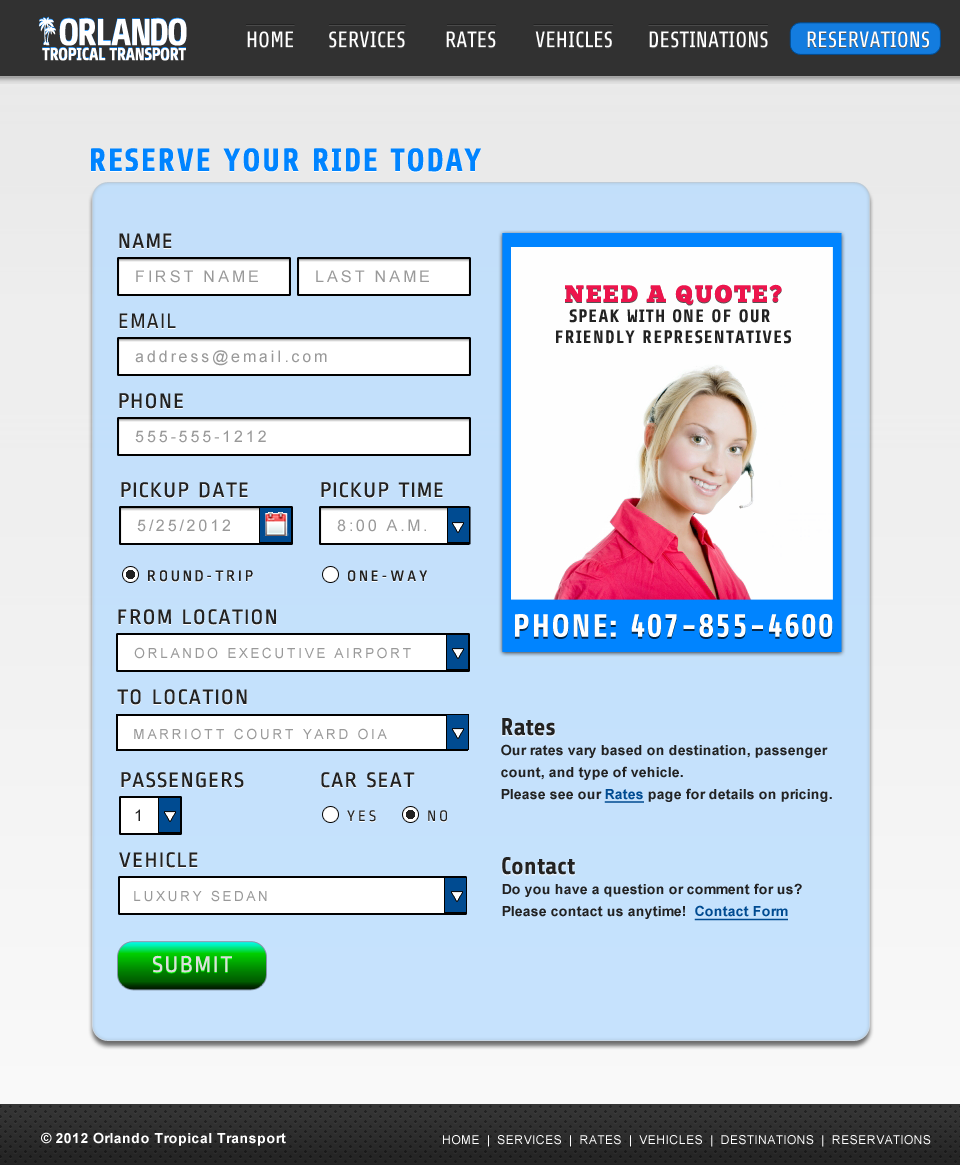
<style>
.page{position:relative;width:960px;height:1165px}
.page>*{position:absolute;margin:0}
.t1{font:22px "Share-Regular";color:#ffffff}
.t2{font:22px "Share-Regular"}
.t3{font:32px "Share-Bold";letter-spacing:0.06em;color:#0084ff;text-transform:uppercase}
.t4{font:22px "RopaSans-Regular";letter-spacing:0.06em;color:#222222;text-transform:uppercase}
.t5{font:16px "ArialMT";letter-spacing:0.18em;color:#999999;text-transform:uppercase}
.t6{font:24px "ChunkFive-Roman";letter-spacing:0.06em;color:#ed144c;text-transform:uppercase}
.t7{font:22px "RopaSans-Regular";letter-spacing:0.06em;text-transform:uppercase}
.t8{font:18px/21.6px "Share-Bold";letter-spacing:0.06em;color:#222222;text-transform:uppercase}
.t9{font:16px "ArialMT";letter-spacing:0.18em;color:#999999}
.t10{font:16px "RopaSans-Regular";letter-spacing:0.18em;text-transform:uppercase}
.t11{font:16px "RopaSans-Regular";letter-spacing:0.18em;color:#222222;text-transform:uppercase}
.t12{font:32px "Share-Bold";letter-spacing:0.06em;color:#fefefe;text-transform:uppercase}
.t13{font:14px "ArialMT";letter-spacing:0.18em;color:#999999;text-transform:uppercase}
.t14{font:24px "Share-Bold";color:#222222}
.t15{font:14px/21.6px "Arial-BoldMT";color:#222222}
.t16{font:24px/21.6px "Share-Bold";color:#222222}
.t17{font:14px/21.6px "Arial-BoldMT";color:#004b91;text-decoration:underline}
.t18{font:16px "ArialMT";letter-spacing:0.18em;color:#222222;text-transform:uppercase}
.t19{font:24px "RopaSans-Regular";letter-spacing:0.06em;color:#dddddd;text-transform:uppercase}
.t20{font:14px "Arial-BoldMT";letter-spacing:0.02em;color:#ffffff}
.t21{font:14px "Arial-BoldMT";letter-spacing:0.02em;color:#ffffff;text-transform:uppercase}
.t22{font:12px "ArialMT";letter-spacing:0.04em;color:#ffffff;text-transform:uppercase}
</style>
<div class="page">
<p class="t1" style="left:247px;top:32px;width:46px;height:17px">HOME</p>
<p class="t1" style="left:247px;top:31px;width:46px;height:17px">HOME</p>
<p class="t2" style="left:329px;top:32px;width:76px;height:17px">SERVICES</p>
<p class="t1" style="left:329px;top:31px;width:76px;height:17px">SERVICES</p>
<p class="t2" style="left:446px;top:32px;width:50px;height:17px">RATES</p>
<p class="t1" style="left:446px;top:31px;width:50px;height:17px">RATES</p>
<p class="t2" style="left:535px;top:32px;width:77px;height:17px">VEHICLES</p>
<p class="t1" style="left:535px;top:31px;width:77px;height:17px">VEHICLES</p>
<p class="t2" style="left:649px;top:32px;width:119px;height:17px">DESTINATIONS</p>
<p class="t1" style="left:649px;top:31px;width:119px;height:17px">DESTINATIONS</p>
<p class="t2" style="left:807px;top:32px;width:122px;height:17px">RESERVATIONS</p>
<p class="t1" style="left:807px;top:31px;width:122px;height:17px">RESERVATIONS</p>
<p class="t3" style="left:91px;top:149px;width:390px;height:24px">reserve your ride today</p>
<p class="t3" style="left:91px;top:148px;width:390px;height:24px">reserve your ride today</p>
<p class="t4" style="left:119px;top:233px;width:53px;height:15px">NAME</p>
<p class="t4" style="left:119px;top:234px;width:53px;height:15px">NAME</p>
<p class="t5" style="left:136px;top:270px;width:122px;height:13px">first name</p>
<p class="t5" style="left:316px;top:270px;width:113px;height:13px">last name</p>
<p class="t6" style="left:565px;top:285px;width:217px;height:21px">NEED A QUOTE?</p>
<p class="t6" style="left:565px;top:284px;width:217px;height:21px">NEED A QUOTE?</p>
<p class="t7" style="left:119px;top:314px;width:57px;height:15px">email</p>
<p class="t4" style="left:119px;top:313px;width:57px;height:15px">email</p>
<p class="t8" style="left:556px;top:309px;width:235px;height:35px;text-align:center">SPEAK WITH one of our <br>friendly REPRESENTATIVEs</p>
<p class="t9" style="left:135px;top:350px;width:192px;height:16px">address@email.com</p>
<p class="t4" style="left:119px;top:394px;width:64px;height:16px">phone</p>
<p class="t4" style="left:119px;top:393px;width:64px;height:16px">phone</p>
<p class="t9" style="left:135px;top:430px;width:131px;height:13px">555-555-1212</p>
<p class="t7" style="left:121px;top:483px;width:127px;height:16px">PICKUP DATE</p>
<p class="t4" style="left:121px;top:482px;width:127px;height:16px">PICKUP DATE</p>
<p class="t4" style="left:321px;top:483px;width:122px;height:16px">PICKUP time</p>
<p class="t4" style="left:321px;top:482px;width:122px;height:16px">PICKUP time</p>
<p class="t5" style="left:137px;top:519px;width:93px;height:13px">5/25/2012</p>
<p class="t5" style="left:337px;top:519px;width:89px;height:13px">8:00 A.M.</p>
<p class="t10" style="left:148px;top:571px;width:105px;height:12px">ROUND-TRIP</p>
<p class="t11" style="left:148px;top:570px;width:105px;height:12px">ROUND-TRIP</p>
<p class="t10" style="left:348px;top:571px;width:79px;height:12px">one-way</p>
<p class="t11" style="left:348px;top:570px;width:79px;height:12px">one-way</p>
<p class="t4" style="left:118px;top:610px;width:158px;height:16px">FROM LOCATION</p>
<p class="t4" style="left:118px;top:609px;width:158px;height:16px">FROM LOCATION</p>
<p class="t12" style="left:515px;top:616px;width:318px;height:23px">PHONE: 407-855-4600</p>
<p class="t12" style="left:515px;top:614px;width:318px;height:23px">PHONE: 407-855-4600</p>
<p class="t13" style="left:134px;top:647px;width:277px;height:12px">orlando executive AIRPORT</p>
<p class="t4" style="left:117px;top:689px;width:130px;height:16px">TO LOCATION</p>
<p class="t4" style="left:117px;top:690px;width:130px;height:16px">TO LOCATION</p>
<p class="t14" style="left:502px;top:718px;width:53px;height:18px">Rates</p>
<p class="t13" style="left:134px;top:728px;width:253px;height:12px">Marriott court yard oia</p>
<p class="t15" style="left:501px;top:744px;width:331px;height:59px"><span class="t16"><br></span>Our rates vary based on destination, passenger<br>count, and type of vehicle. <br>Please see our <span class="t17">Rates</span> page for details on pricing.</p>
<p class="t7" style="left:121px;top:773px;width:123px;height:16px">PASSENGERS</p>
<p class="t4" style="left:121px;top:772px;width:123px;height:16px">PASSENGERS</p>
<p class="t7" style="left:321px;top:773px;width:94px;height:16px">CAR SEAT</p>
<p class="t4" style="left:321px;top:772px;width:94px;height:16px">CAR SEAT</p>
<p class="t18" style="left:135px;top:809px;width:5px;height:12px">1</p>
<p class="t10" style="left:347px;top:811px;width:29px;height:12px">yes</p>
<p class="t11" style="left:347px;top:810px;width:29px;height:12px">yes</p>
<p class="t10" style="left:428px;top:811px;width:19px;height:12px">no</p>
<p class="t11" style="left:428px;top:810px;width:19px;height:12px">no</p>
<p class="t7" style="left:119px;top:853px;width:79px;height:16px">vehicle</p>
<p class="t4" style="left:119px;top:852px;width:79px;height:16px">vehicle</p>
<p class="t14" style="left:502px;top:857px;width:73px;height:18px">Contact</p>
<p class="t13" style="left:134px;top:890px;width:133px;height:12px">luxury sedan</p>
<p class="t15" style="left:502px;top:883px;width:300px;height:38px"><span class="t16"><br></span>Do you have a question or comment for us? <br>Please contact us anytime!  <span class="t17">Contact Form</span></p>
<p class="t19" style="left:153px;top:956px;width:79px;height:18px">submit</p>
<p class="t19" style="left:153px;top:955px;width:79px;height:18px">submit</p>
<p class="t20" style="left:41px;top:1132px;width:245px;height:14px"><span class="t21">© 2012 O</span>rlando Tropical Transport</p>
<p class="t22" style="left:443px;top:1135px;width:488px;height:12px">HOME  |  SERVICES  |  RATES  |  VEHICLES  |  DESTINATIONS  |  RESERVATIONS</p>
</div>
